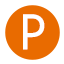
<style>
.page{position:relative;width:64px;height:64px;background:#ffffff}
.page>*{position:absolute;margin:0}
.t1{font:52px "Gidole-Regular";color:#ffffff;font-weight:bold}
</style>
<div class="page">
<p class="t1" style="left:23px;top:14px;width:22px;height:36px">P</p>
</div>
